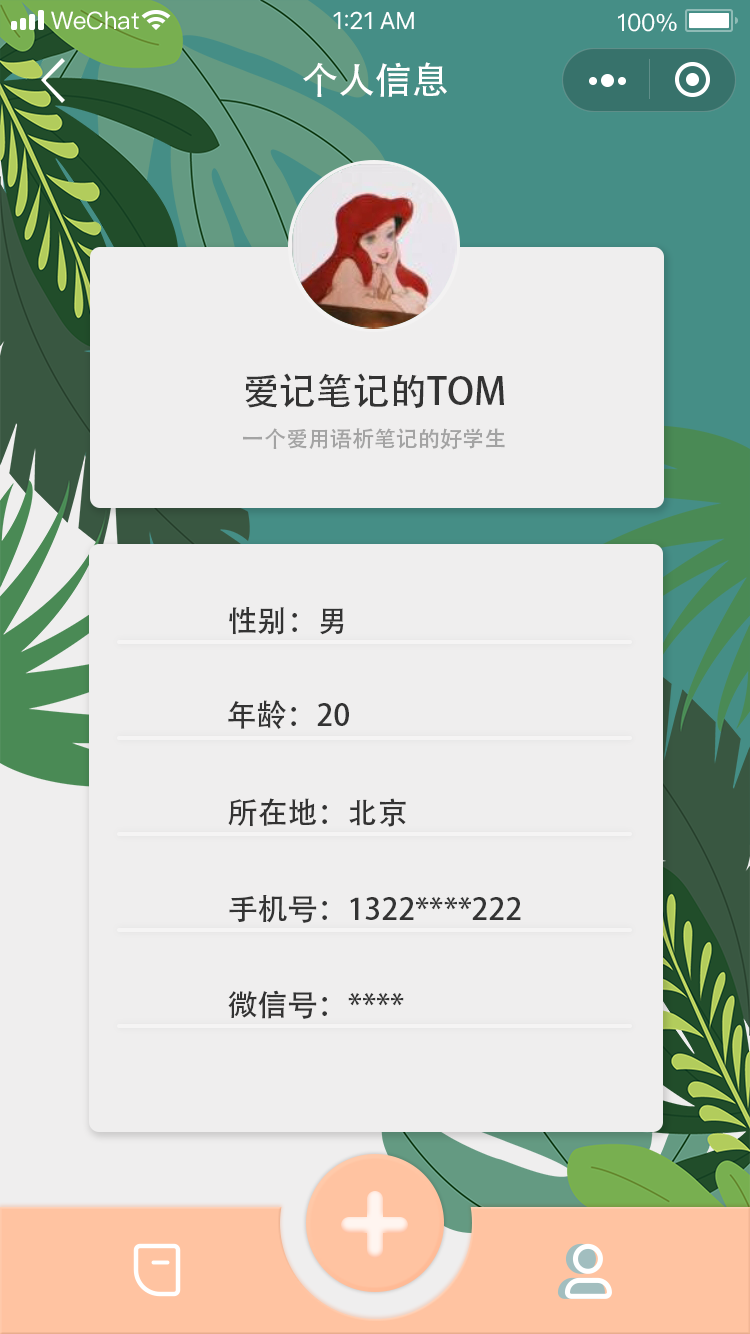
<style>
.page{position:relative;width:750px;height:1334px;background:#efeeee}
.page>*{position:absolute;margin:0}
.t1{font:37px "AdobeHeitiStd-Regular";color:#ffffff}
.t2{font:37px "AdobeHeitiStd-Regular";color:#333333}
.t3{font:22px "AdobeHeitiStd-Regular";color:#a3a3a3}
.t4{font:30px "AdobeHeitiStd-Regular";color:#333333}
</style>
<div class="page">
<p class="t1" style="left:303px;top:62px;width:144px;height:35px">个人信息</p>
<p class="t2" style="left:245px;top:373px;width:259px;height:35px">爱记笔记的TOM</p>
<p class="t3" style="left:243px;top:428px;width:262px;height:22px">一个爱用语析笔记的好学生</p>
<p class="t4" style="left:229px;top:606px;width:115px;height:29px">性别：男</p>
<p class="t4" style="left:228px;top:700px;width:121px;height:29px">年龄：20</p>
<p class="t4" style="left:228px;top:798px;width:178px;height:29px">所在地：北京</p>
<p class="t4" style="left:229px;top:895px;width:292px;height:28px">手机号：1322****222</p>
<p class="t4" style="left:228px;top:990px;width:176px;height:29px">微信号：****</p>
</div>
